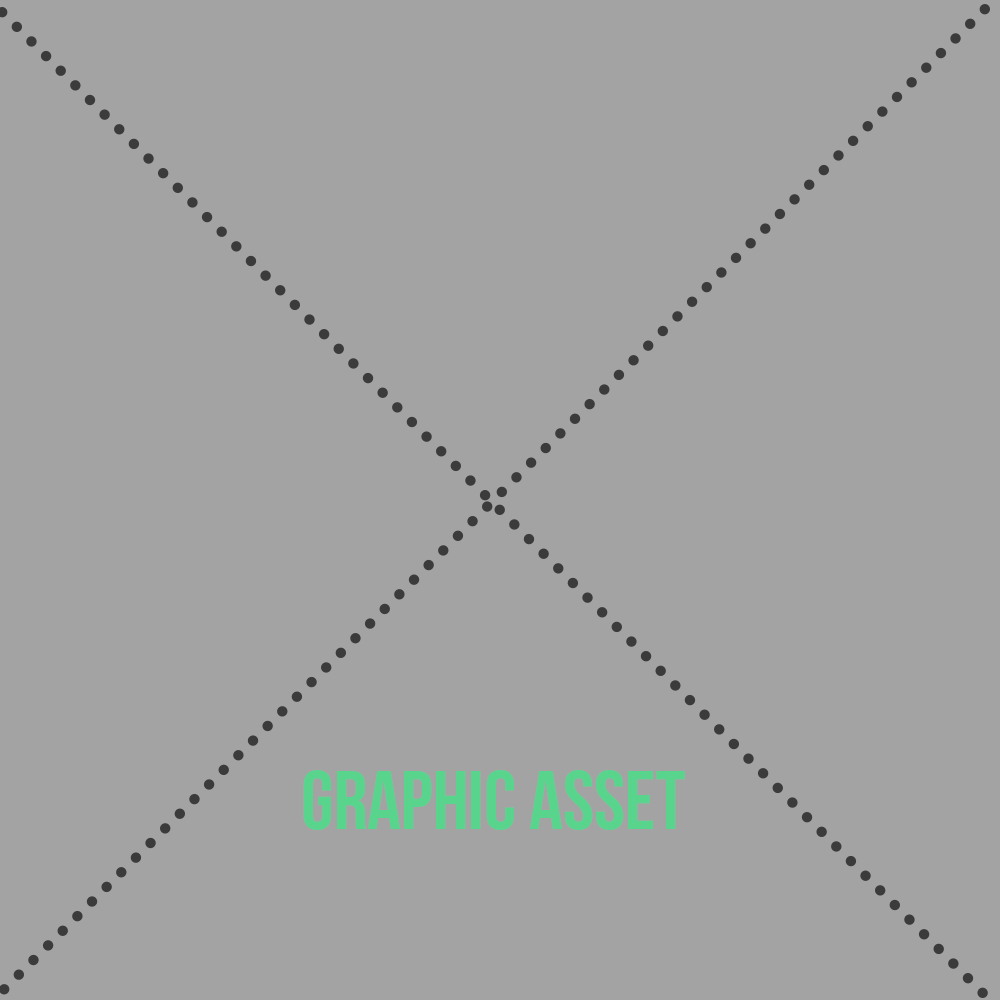
<style>
.page{position:relative;width:1000px;height:1000px;background:#a3a3a3}
.page>*{position:absolute;margin:0}
.t1{font:83.3px "BebasNeue";color:#58d48d}
</style>
<div class="page">
<p class="t1" style="left:303px;top:770px;width:382px;height:60px">GRaphic ASSET</p>
</div>
